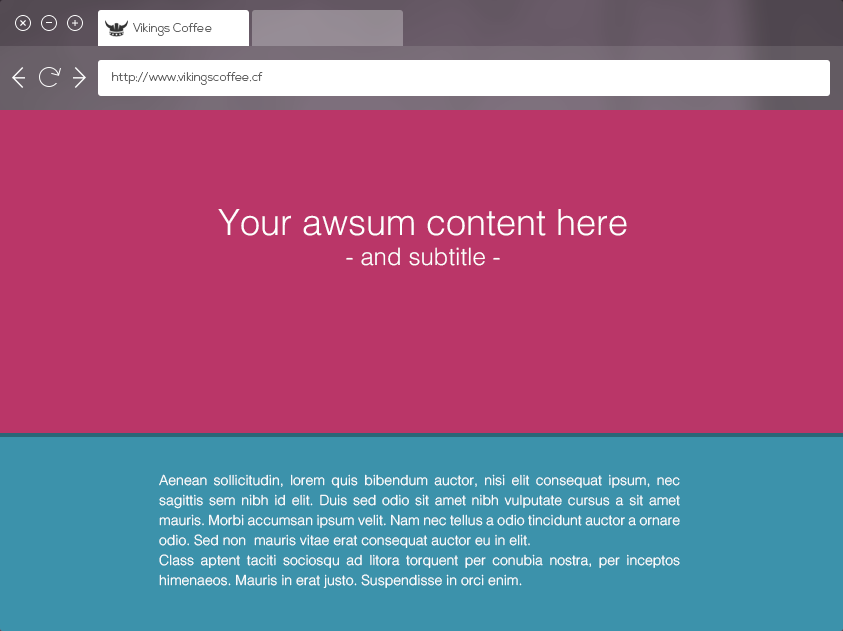
<style>
.page{position:relative;width:843px;height:631px;background:#ba3668}
.page>*{position:absolute;margin:0}
.t1{font:12px "NexaLight";color:#636363}
.t2{font:36px "Helvetica-Light";color:#ffffff}
.t3{font:24px "Helvetica-Light";color:#ffffff}
.t4{font:14px/20px "Helvetica-Light";color:#ffffff}
</style>
<div class="page">
<p class="t1" style="left:133px;top:23px;width:79px;height:13px">Vikings Coffee</p>
<p class="t1" style="left:112px;top:72px;width:151px;height:13px">http://www.vikingscoffee.cf</p>
<p class="t2" style="left:218px;top:209px;width:409px;height:27px">Your awsum content here</p>
<p class="t3" style="left:346px;top:247px;width:154px;height:19px">- and subtitle -</p>
<p class="t4" style="left:159px;top:474px;width:521px;height:114px;text-align:justify">Aenean sollicitudin, lorem quis bibendum auctor, nisi elit consequat ipsum, nec sagittis sem nibh id elit. Duis sed odio sit amet nibh vulputate cursus a sit amet mauris. Morbi accumsan ipsum velit. Nam nec tellus a odio tincidunt auctor a ornare odio. Sed non  mauris vitae erat consequat auctor eu in elit. <br>Class aptent taciti sociosqu ad litora torquent per conubia nostra, per inceptos himenaeos. Mauris in erat justo. Suspendisse in orci enim.</p>
</div>
